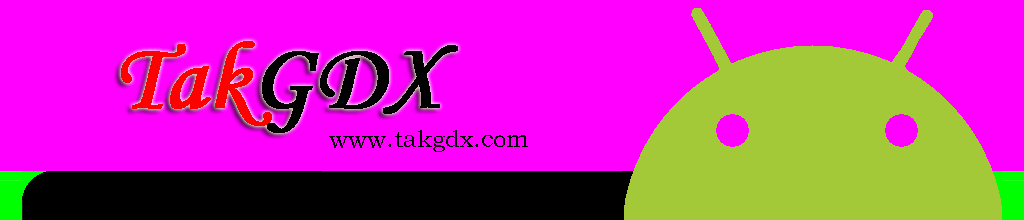
<style>
.page{position:relative;width:1024px;height:220px;background:#ff00ff}
.page>*{position:absolute;margin:0}
.t1{font:96px "STLiti";color:#ff0000;font-weight:bold}
.t2{font:96px "STLiti";color:#000000;font-weight:bold}
.t3{font:24px "STZhongsong";color:#000000}
</style>
<div class="page">
<p class="t1" style="left:121px;top:41px;width:337px;height:92px">Tak<span class="t2">GDX</span></p>
<p class="t3" style="left:329px;top:130px;width:199px;height:22px">www.takgdx.com</p>
</div>
